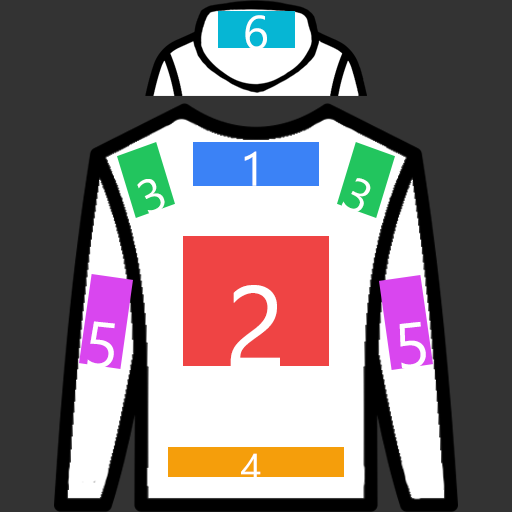
<style>
.page{position:relative;width:512px;height:512px;background:#333333}
.page>*{position:absolute;margin:0}
.t1{font:48px "SegoeUISymbol";color:#ffffff}
.t2{font:113.9px "SegoeUISymbol";color:#ffffff}
.t3{font:64.2px "SegoeUISymbol";color:#ffffff}
.t4{font:38.8px "SegoeUISymbol";color:#ffffff}
</style>
<div class="page">
<p class="t1" style="left:245px;top:15px;width:22px;height:35px">6</p>
<p class="t1" style="left:244px;top:151px;width:13px;height:35px">1</p>
<p class="t1" style="left:137px;top:179px;width:28px;height:35px;rotate:-25deg">3</p>
<p class="t1" style="left:341px;top:178px;width:30px;height:34px;rotate:27deg">3</p>
<p class="t2" style="left:230px;top:285px;width:50px;height:82px">2</p>
<p class="t3" style="left:87px;top:321px;width:28px;height:47px;rotate:6deg">5</p>
<p class="t3" style="left:399px;top:321px;width:27px;height:48px;rotate:-6deg">5</p>
<p class="t4" style="left:241px;top:453px;width:20px;height:28px">4</p>
</div>
